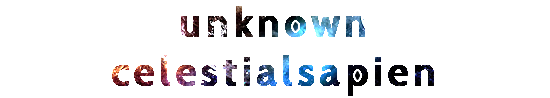
<style>
.page{position:relative;width:550px;height:98px;background:#ffffff}
.page>*{position:absolute;margin:0}
.t1{font:40.7px "CabinCondensed-Regular";letter-spacing:0.1em;font-weight:bold;scale:1.11 1}
</style>
<div class="page">
<p class="t1" style="left:112px;top:6px;width:322px;height:90px;text-align:center">unknown<br>celestialsapien</p>
</div>
